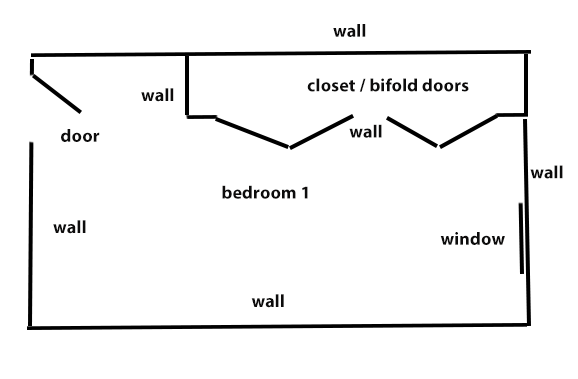
<style>
.page{position:relative;width:578px;height:379px;background:#ffffff}
.page>*{position:absolute;margin:0}
.t1{font:18px "MyriadPro-Bold";letter-spacing:0.01em;color:#0d0c0c}
</style>
<div class="page">
<p class="t1" style="left:333px;top:24px;width:33px;height:13px">wall</p>
<p class="t1" style="left:307px;top:78px;width:162px;height:14px">closet / bifold doors</p>
<p class="t1" style="left:141px;top:88px;width:33px;height:14px">wall</p>
<p class="t1" style="left:349px;top:124px;width:33px;height:14px">wall</p>
<p class="t1" style="left:61px;top:129px;width:39px;height:13px">door</p>
<p class="t1" style="left:530px;top:165px;width:33px;height:14px">wall</p>
<p class="t1" style="left:222px;top:185px;width:86px;height:14px">bedroom 1</p>
<p class="t1" style="left:53px;top:220px;width:33px;height:14px">wall</p>
<p class="t1" style="left:440px;top:232px;width:65px;height:13px">window</p>
<p class="t1" style="left:251px;top:294px;width:33px;height:14px">wall</p>
</div>
